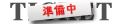
<style>
.page{position:relative;width:120px;height:24px;background:#ffffff}
.page>*{position:absolute;margin:0}
.t1{font:24px "DFLeiGaSo-W9-WINP-RKSJ-H";letter-spacing:0.1em;font-weight:bold;scale:0.9 1}
</style>
<div class="page">
<p class="t1" style="left:10px;top:2px;width:102px;height:19px">TICKET</p>
</div>
